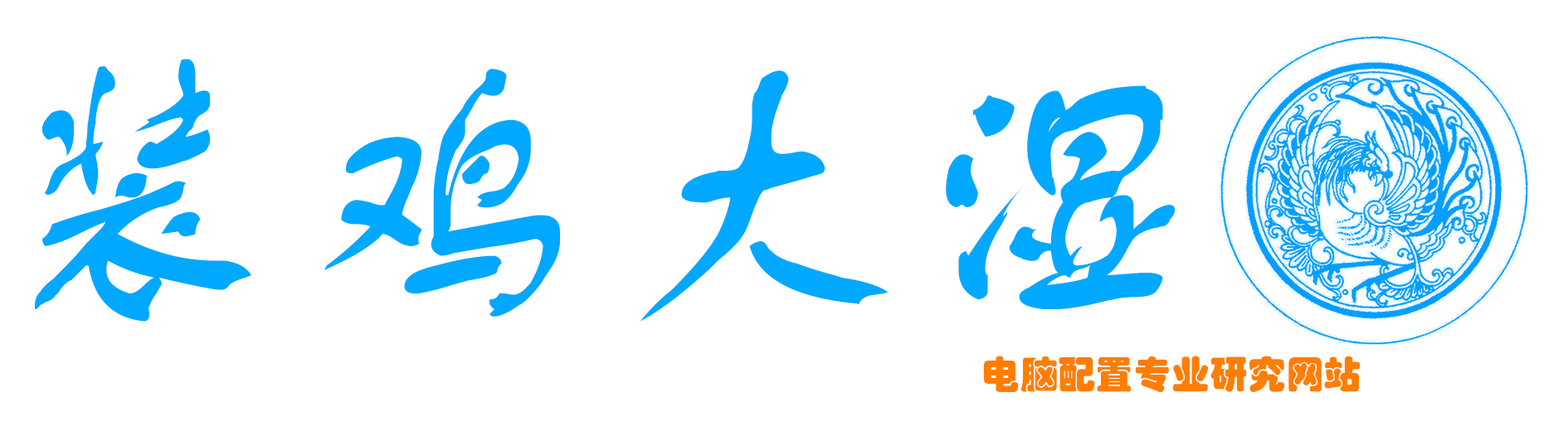
<style>
.page{position:relative;width:1568px;height:431px;background:#ffffff}
.page>*{position:absolute;margin:0}
.t1{font:311.1px "FZSTK--GBK1-0";color:#00a8ff}
.t2{font:38px "STHupo";color:#ff7e00}
</style>
<div class="page">
<p class="t1" style="left:34px;top:59px;width:1142px;height:263px">装鸡大湿</p>
<p class="t2" style="left:983px;top:356px;width:378px;height:36px">电脑配置专业研究网站</p>
</div>
